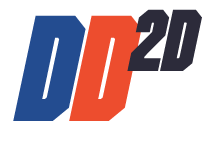
<style>
.page{position:relative;width:214px;height:142px;background:#ffffff}
.page>*{position:absolute;margin:0}
.t1{font:150px "ZuumeEdge-BlackItalic";color:#2c2b3a}
.t2{font:150px "ZuumeEdge-BlackItalic";color:#234c90}
.t3{font:150px "ZuumeEdge-BlackItalic";color:#ed4d2e}
</style>
<div class="page">
<p class="t1" style="left:13px;top:9px;width:189px;height:112px"><span class="t2">D</span><span class="t3">D</span>2D</p>
</div>
